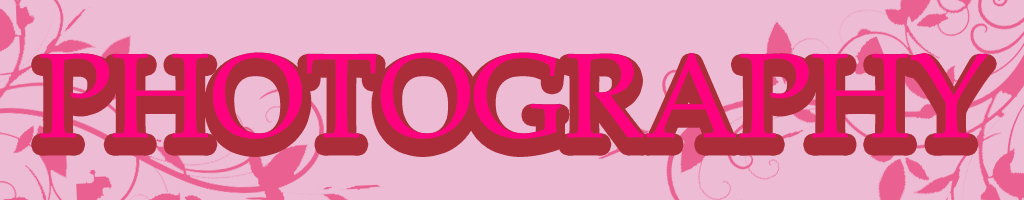
<style>
.page{position:relative;width:1024px;height:200px;background:#edbbd4}
.page>*{position:absolute;margin:0}
.t1{font:120px "BookAntiqua";color:#ff007f}
</style>
<div class="page">
<p class="t1" style="left:40px;top:52px;width:948px;height:87px">PHOTOGRAPHY</p>
</div>
